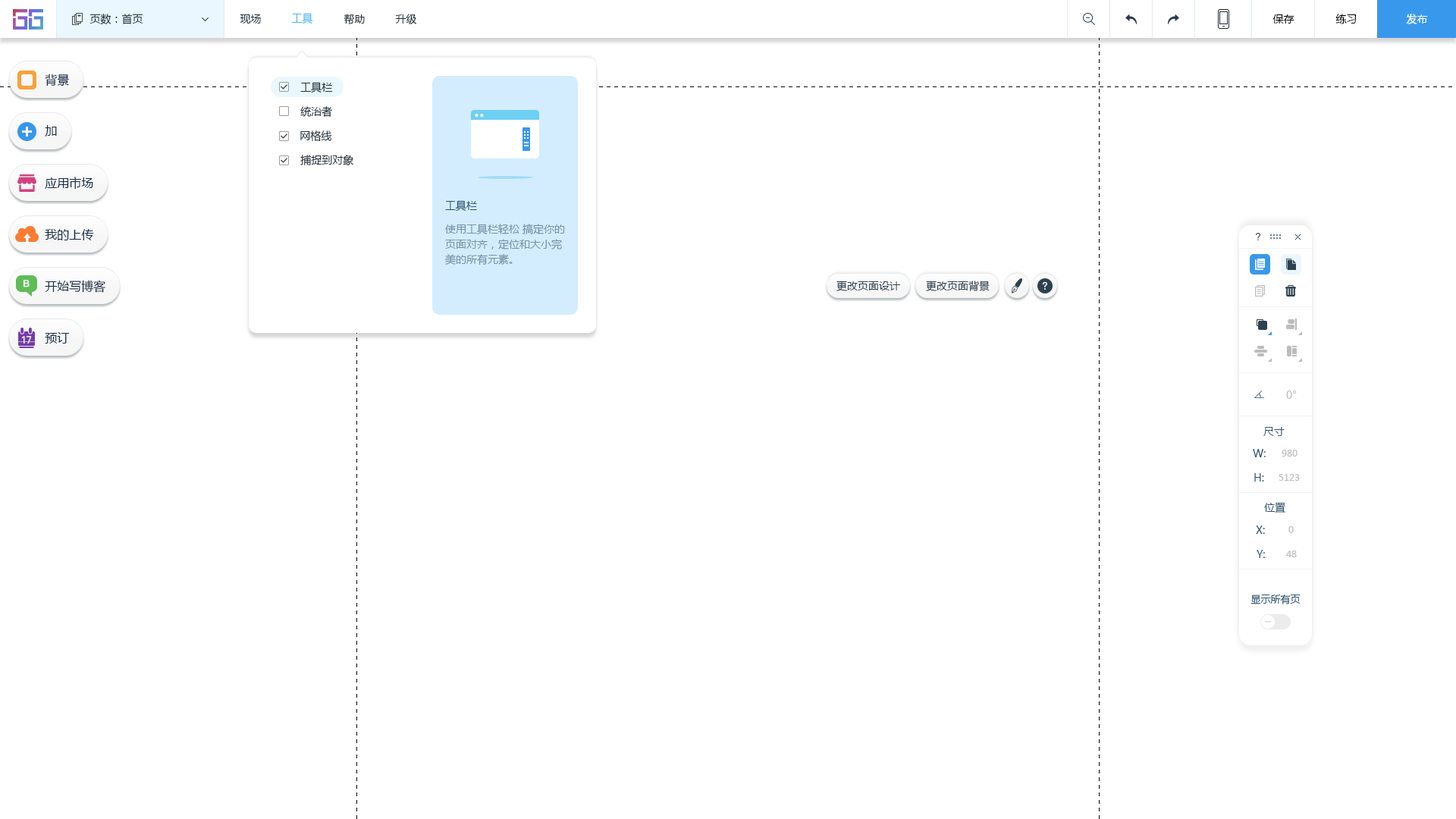
<style>
.page{position:relative;width:1456px;height:819px;background:#ffffff}
.page>*{position:absolute;margin:0}
.t1{font:10.6px "MicrosoftYaHei";color:#20303c}
.t2{font:10.6px "MicrosoftYaHei";color:#4eb7f5}
.t3{font:10.6px "MicrosoftYaHei";color:#000000}
.t4{font:10.6px "MicrosoftYaHei";color:#ffffff}
.t5{font:12.1px "MicrosoftYaHei";color:#152b4a}
.t6{font:10.6px "MicrosoftYaHei";color:#2b5672}
.t7{font:10.6px/15.2px "MicrosoftYaHei";color:#7a92a5}
.t8{font:10.6px "MicrosoftYaHei";color:#2d4150}
.t9{font:10.6px "MicrosoftYaHei";color:#bcbcbc}
.t10{font:9.1px "MicrosoftYaHei";color:#bcbcbc}
.t11{font:9.9px "MicrosoftYaHei";color:#2b5672}
</style>
<div class="page">
<p class="t1" style="left:89px;top:14px;width:54px;height:11px">页数：首页</p>
<p class="t1" style="left:240px;top:14px;width:21px;height:10px">现场</p>
<p class="t2" style="left:291px;top:13px;width:22px;height:11px">工具</p>
<p class="t1" style="left:344px;top:14px;width:21px;height:11px">帮助</p>
<p class="t1" style="left:395px;top:14px;width:22px;height:10px">升级</p>
<p class="t3" style="left:1272px;top:14px;width:22px;height:10px">保存</p>
<p class="t3" style="left:1335px;top:14px;width:22px;height:10px">练习</p>
<p class="t4" style="left:1406px;top:14px;width:22px;height:10px">发布</p>
<p class="t5" style="left:45px;top:74px;width:24px;height:12px">背景</p>
<p class="t1" style="left:300px;top:82px;width:33px;height:11px">工具栏</p>
<p class="t1" style="left:300px;top:106px;width:33px;height:11px">统治者</p>
<p class="t5" style="left:45px;top:125px;width:12px;height:11px">加</p>
<p class="t1" style="left:300px;top:130px;width:32px;height:12px">网格线</p>
<p class="t1" style="left:300px;top:155px;width:53px;height:10px">捕捉到对象</p>
<p class="t5" style="left:45px;top:177px;width:48px;height:12px">应用市场</p>
<p class="t6" style="left:445px;top:200px;width:32px;height:11px">工具栏</p>
<p class="t5" style="left:45px;top:229px;width:49px;height:11px">我的上传</p>
<p class="t7" style="left:445px;top:224px;width:120px;height:41px">使用工具栏轻松 搞定你的<br>页面对齐，定位和大小完<br>美的所有元素。</p>
<p class="t5" style="left:45px;top:280px;width:60px;height:13px">开始写博客</p>
<p class="t8" style="left:836px;top:281px;width:64px;height:10px">更改页面设计</p>
<p class="t8" style="left:926px;top:281px;width:64px;height:10px">更改页面背景</p>
<p class="t5" style="left:45px;top:332px;width:25px;height:12px">预订</p>
<p class="t9" style="left:1286px;top:391px;width:11px;height:8px">0°</p>
<p class="t6" style="left:1263px;top:427px;width:22px;height:9px">尺寸</p>
<p class="t6" style="left:1253px;top:449px;width:13px;height:8px">W:</p>
<p class="t10" style="left:1282px;top:450px;width:15px;height:7px">980</p>
<p class="t6" style="left:1254px;top:473px;width:10px;height:9px">H:</p>
<p class="t10" style="left:1279px;top:474px;width:21px;height:7px">5123</p>
<p class="t6" style="left:1264px;top:502px;width:22px;height:11px">位置</p>
<p class="t6" style="left:1256px;top:526px;width:9px;height:8px">X:</p>
<p class="t10" style="left:1288px;top:526px;width:6px;height:7px">0</p>
<p class="t6" style="left:1257px;top:550px;width:8px;height:8px">Y:</p>
<p class="t10" style="left:1286px;top:551px;width:11px;height:6px">48</p>
<p class="t11" style="left:1250px;top:594px;width:51px;height:10px">显示所有页</p>
</div>
